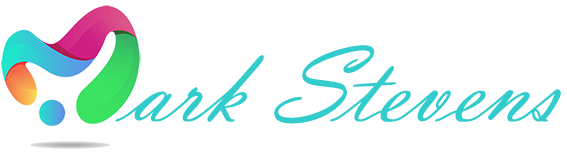
<style>
.page{position:relative;width:567px;height:156px;background:#ffffff}
.page>*{position:absolute;margin:0}
.t1{font:111.1px "VladimirScript";color:#33cccc}
</style>
<div class="page">
<p class="t1" style="left:115px;top:45px;width:446px;height:79px">ark Stevens</p>
</div>
